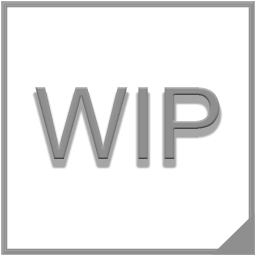
<style>
.page{position:relative;width:256px;height:256px;background:#ffffff}
.page>*{position:absolute;margin:0}
.t1{font:100px "ArialMT";color:#8f8f8f}
</style>
<div class="page">
<p class="t1" style="left:35px;top:87px;width:185px;height:72px">WIP</p>
</div>
